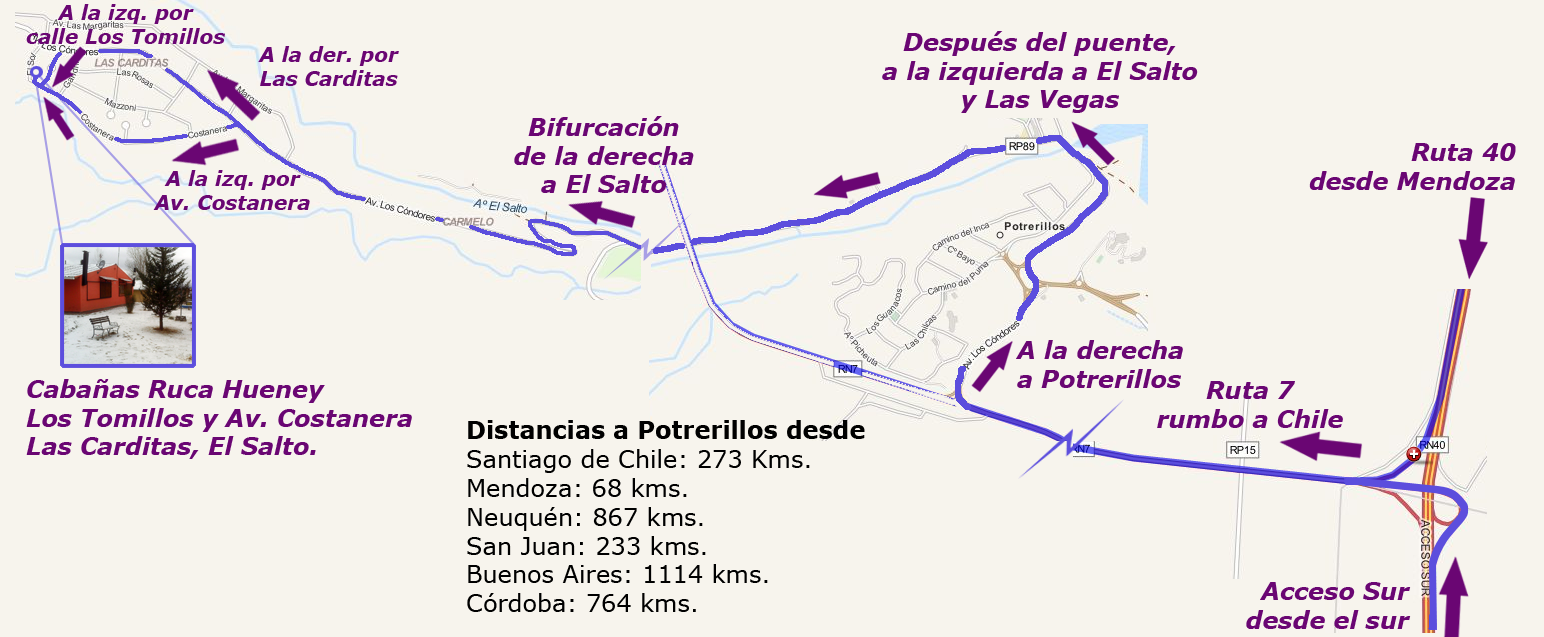
<style>
.page{position:relative;width:1544px;height:637px;background:#f7f4ed}
.page>*{position:absolute;margin:0}
.t1{font:20px "Verdana-BoldItalic";color:#6a0673}
.t2{font:24px "Verdana-BoldItalic";color:#6a0673}
.t3{font:24px "Verdana";color:#000000}
.t4{font:24px "Verdana-Bold";color:#000000}
</style>
<div class="page">
<p class="t1" style="left:26px;top:4px;width:199px;height:40px;text-align:center">A la izq. por<br>calle Los Tomillos</p>
<p class="t2" style="left:882px;top:31px;width:316px;height:82px;text-align:center">Después del puente,<br>a la izquierda a El Salto<br>y Las Vegas</p>
<p class="t1" style="left:258px;top:46px;width:141px;height:40px;text-align:center">A la der. por<br>Las Carditas</p>
<p class="t2" style="left:514px;top:116px;width:180px;height:77px;text-align:center">Bifurcación<br>de la derecha<br>a El Salto</p>
<p class="t2" style="left:1309px;top:143px;width:207px;height:47px;text-align:right">Ruta 40<br>desde Mendoza</p>
<p class="t1" style="left:153px;top:170px;width:157px;height:40px;text-align:center">A la izq. por<br>Av. Costanera</p>
<p class="t2" style="left:1016px;top:340px;width:167px;height:48px">A la derecha<br>a Potrerillos</p>
<p class="t2" style="left:26px;top:379px;width:386px;height:80px">Cabañas Ruca Hueney<br>Los Tomillos y Av. Costanera<br>Las Carditas, El Salto.</p>
<p class="t2" style="left:1157px;top:381px;width:186px;height:47px;text-align:center">Ruta 7<br>rumbo a Chile</p>
<p class="t3" style="left:467px;top:420px;width:398px;height:192px"><span class="t4">Distancias a Potrerillos desde<br></span>Santiago de Chile: 273 Kms.<br>Mendoza: 68 kms.<br>Neuquén: 867 kms.<br>San Juan: 233 kms.<br>Buenos Aires: 1114 kms.<br>Córdoba: 764 kms.</p>
<p class="t2" style="left:1246px;top:582px;width:165px;height:47px;text-align:right">Acceso Sur<br>desde el sur</p>
</div>
